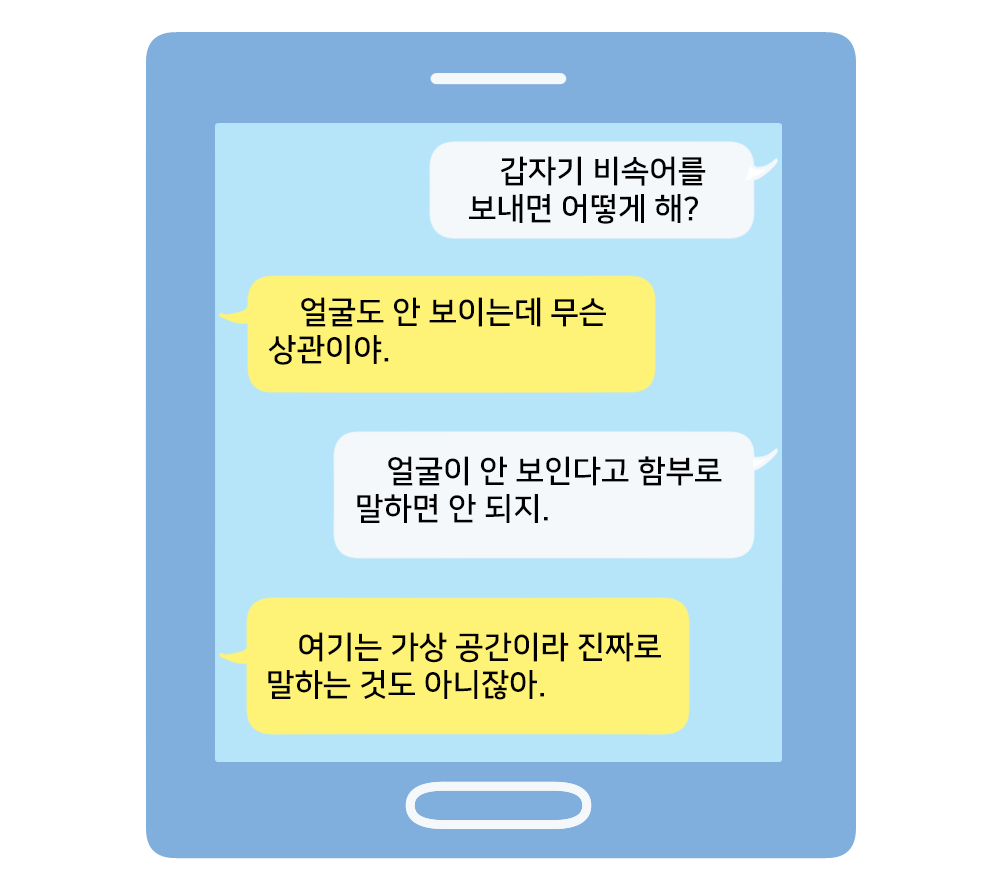
<style>
.page{position:relative;width:1000px;height:880px;background:#ffffff}
.page>*{position:absolute;margin:0}
.t1{font:31.2px "NanumSquareB";color:#000000}
</style>
<div class="page">
<p class="t1" style="left:469px;top:156px;width:237px;height:68px">갑자기 비속어를<br>보내면 어떻게 해?</p>
<p class="t1" style="left:268px;top:297px;width:338px;height:68px">얼굴도 안 보이는데 무슨<br>상관이야.</p>
<p class="t1" style="left:357px;top:456px;width:365px;height:67px">얼굴이 안 보인다고 함부로<br>말하면 안 되지.</p>
<p class="t1" style="left:268px;top:632px;width:393px;height:68px">여기는 가상 공간이라 진짜로<br>말하는 것도 아니잖아.</p>
</div>
